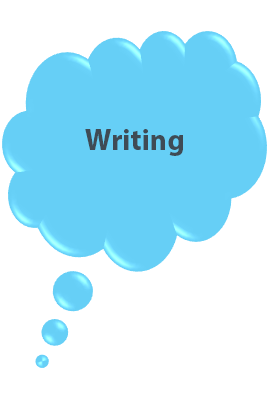
<style>
.page{position:relative;width:269px;height:400px;background:#ffffff}
.page>*{position:absolute;margin:0}
.t1{font:30px "MyriadPro-Bold";color:#3f4b55}
</style>
<div class="page">
<p class="t1" style="left:85px;top:129px;width:98px;height:27px">Writing</p>
</div>
